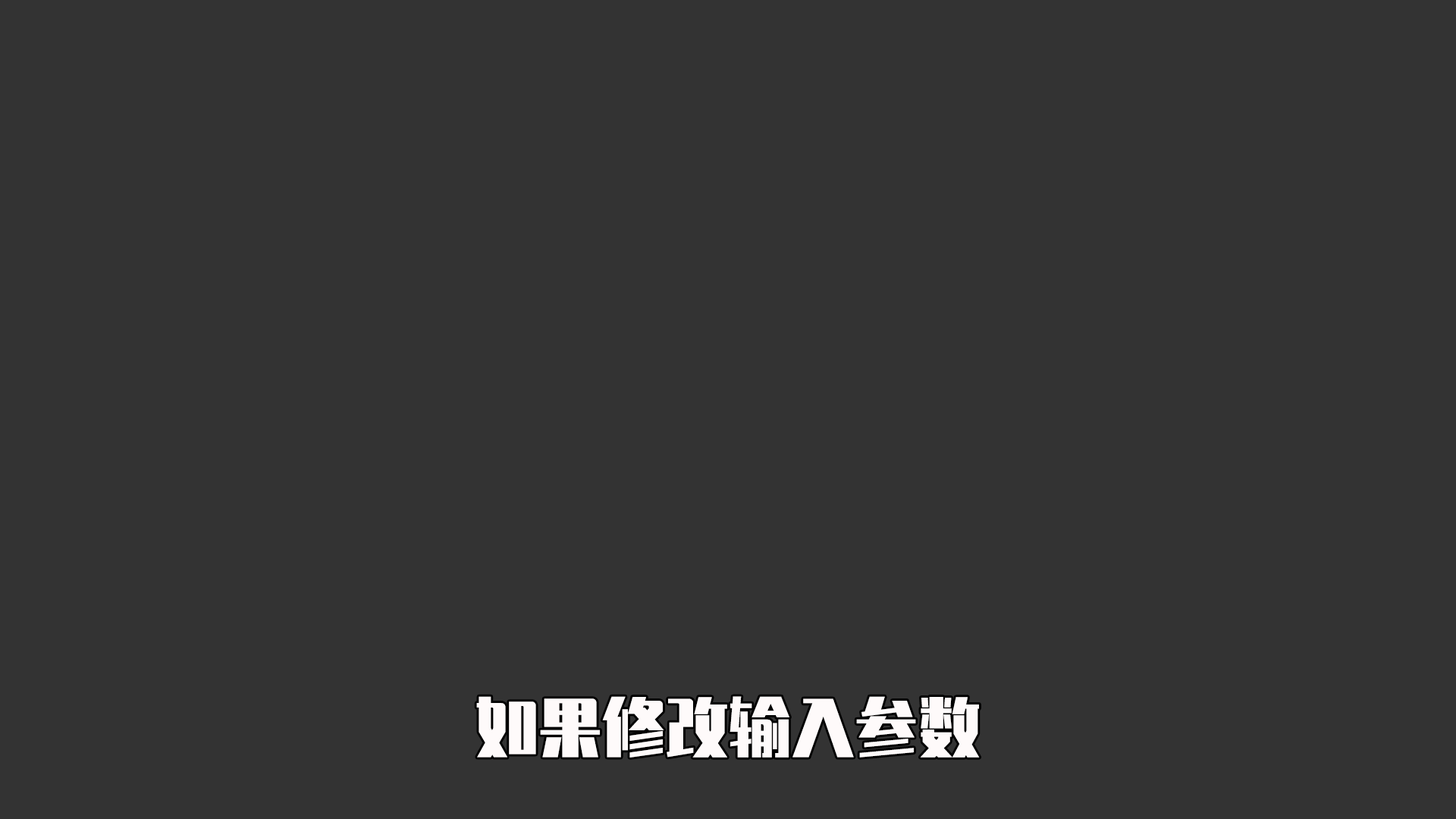
<style>
.page{position:relative;width:1456px;height:819px;background:#333333}
.page>*{position:absolute;margin:0}
.t1{font:63.2px "ZhenyanGB-Regular";color:#fefafa}
</style>
<div class="page">
<p class="t1" style="left:476px;top:696px;width:504px;height:62px">如果修改输入参数</p>
</div>
